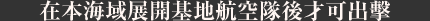
<style>
.page{position:relative;width:430px;height:21px;background:#333333}
.page>*{position:absolute;margin:0}
.t1{font:22px "RyuminPr6N-ExBold";color:#fff6f2}
</style>
<div class="page">
<p class="t1" style="left:39px;top:0px;width:352px;height:22px">在本海域展開基地航空隊後才可出擊</p>
</div>
